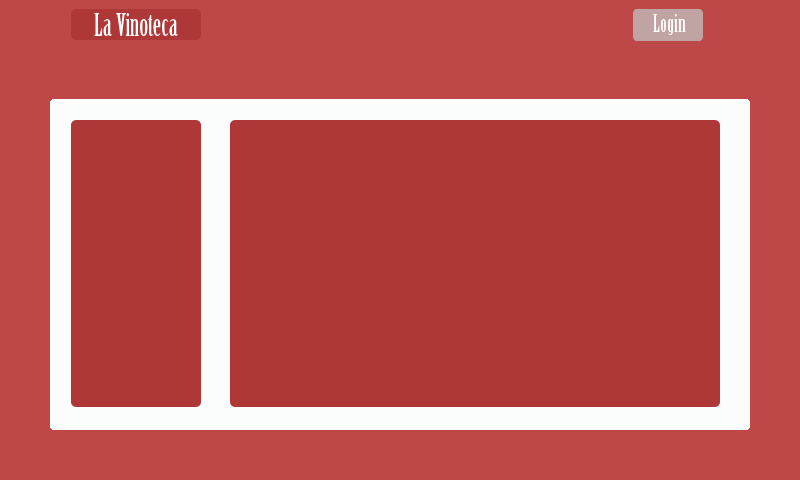
<style>
.page{position:relative;width:800px;height:480px;background:#ae3838}
.page>*{position:absolute;margin:0}
.t1{font:30px "BirchStd";color:#ffffff}
.t2{font:24px "BirchStd";color:#fefdfd}
.t3{font:30px "BirchStd";color:#fefdfd}
</style>
<div class="page">
<p class="t1" style="left:94px;top:13px;width:84px;height:23px">La Vinoteca</p>
<p class="t2" style="left:653px;top:14px;width:33px;height:21px"><span class="t3">   </span>   Login</p>
</div>
